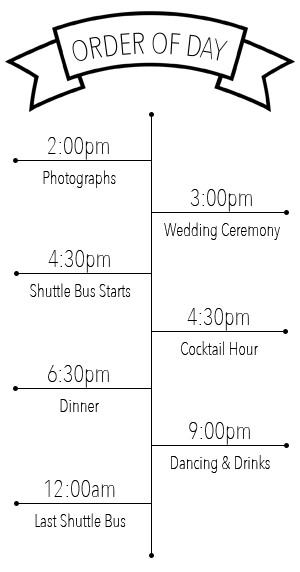
<style>
.page{position:relative;width:300px;height:572px;background:#ffffff}
.page>*{position:absolute;margin:0}
.t1{font:30px "AvenirNextCondensed-UltraLight";color:#000000}
.t2{font:24px "AvenirNextCondensed-UltraLight";color:#000000}
.t3{font:18px "AvenirNextCondensed-UltraLight";color:#000000}
.t4{font:23.9px "AvenirNextCondensed-UltraLight";color:#000000}
</style>
<div class="page">
<p class="t1" style="left:72px;top:32px;width:156px;height:29px">ORDER OF DAY</p>
<p class="t2" style="left:48px;top:137px;width:61px;height:23px">2:00pm</p>
<p class="t3" style="left:43px;top:170px;width:73px;height:18px">Photographs</p>
<p class="t2" style="left:190px;top:189px;width:62px;height:23px">3:00pm</p>
<p class="t3" style="left:164px;top:222px;width:116px;height:18px">Wedding Ceremony</p>
<p class="t4" style="left:48px;top:250px;width:62px;height:23px">4:30pm</p>
<p class="t3" style="left:30px;top:283px;width:101px;height:14px">Shuttle Bus Starts</p>
<p class="t2" style="left:187px;top:308px;width:62px;height:23px">4:30pm</p>
<p class="t3" style="left:181px;top:341px;width:77px;height:14px">Cocktail Hour</p>
<p class="t4" style="left:48px;top:365px;width:61px;height:23px">6:30pm</p>
<p class="t3" style="left:60px;top:399px;width:39px;height:13px">Dinner</p>
<p class="t2" style="left:189px;top:422px;width:61px;height:23px">9:00pm</p>
<p class="t3" style="left:171px;top:455px;width:99px;height:18px">Dancing &amp; Drinks</p>
<p class="t4" style="left:45px;top:480px;width:70px;height:17px">12:00am</p>
<p class="t3" style="left:35px;top:513px;width:91px;height:14px">Last Shuttle Bus</p>
</div>
